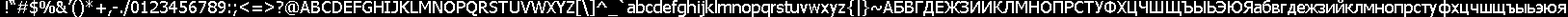
<style>
.page{position:relative;width:1568px;height:17px;background:#000000}
.page>*{position:absolute;margin:0}
.t1{font:17.3px "Tahoma";color:#ffffff}
</style>
<div class="page">
<p class="t1" style="left:6px;top:0px;width:1560px;height:17px">!“#$%&amp;’()*+,-./0123456789:;&lt;=&gt;?@ABCDEFGHIJKLMNOPQRSTUVWXYZ[\]^_`abcdefghijklmnopqrstuvwxyz{|}~АБВГДЕЖЗИЙКЛМНОПРСТУФХЦЧШЩЪЫЬЭЮЯабвгдежзийклмнопрстуфхцчшщъыьэюя</p>
</div>
